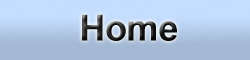
<style>
.page{position:relative;width:250px;height:60px}
.page>*{position:absolute;margin:0}
.t1{font:36px "Arial-BoldMT";letter-spacing:-0.01em}
</style>
<div class="page">
<p class="t1" style="left:82px;top:14px;width:95px;height:27px">Home</p>
</div>
